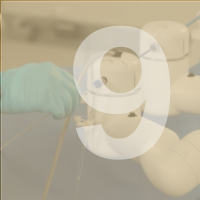
<style>
.page{position:relative;width:200px;height:200px}
.page>*{position:absolute;margin:0}
.t1{font:187.5px "PostGrotesk-Bold";color:#ded7c7}
</style>
<div class="page">
<p class="t1" style="left:73px;top:25px;width:98px;height:135px">9</p>
</div>
